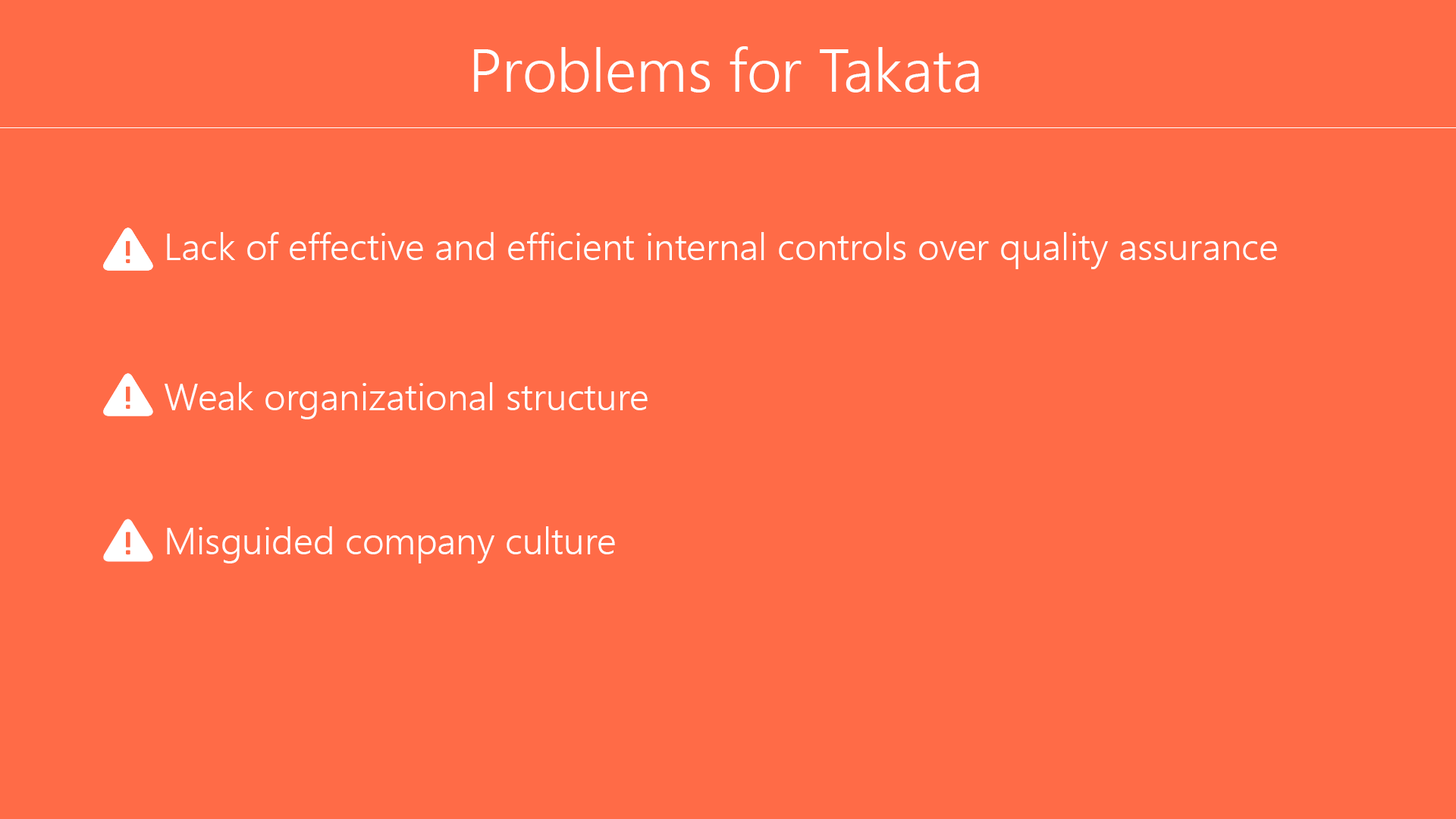
<style>
.page{position:relative;width:1456px;height:819px;background:#ff6b47}
.page>*{position:absolute;margin:0}
.t1{font:60.7px "SegoeUI-Semilight";color:#ffffff}
.t2{font:43.2px "SegoeUI-Semilight";color:#ffffff}
.t3{font:37.9px "SegoeUI-Semilight";color:#ffffff}
</style>
<div class="page">
<p class="t1" style="left:474px;top:46px;width:505px;height:47px"><span class="t2"><br></span><br><br>Problems for Takata</p>
<p class="t3" style="left:167px;top:232px;width:1110px;height:37px">Lack of effective and efficient internal controls over quality assurance</p>
<p class="t3" style="left:165px;top:382px;width:483px;height:37px">Weak organizational structure</p>
<p class="t3" style="left:167px;top:526px;width:448px;height:37px">Misguided company culture</p>
</div>
